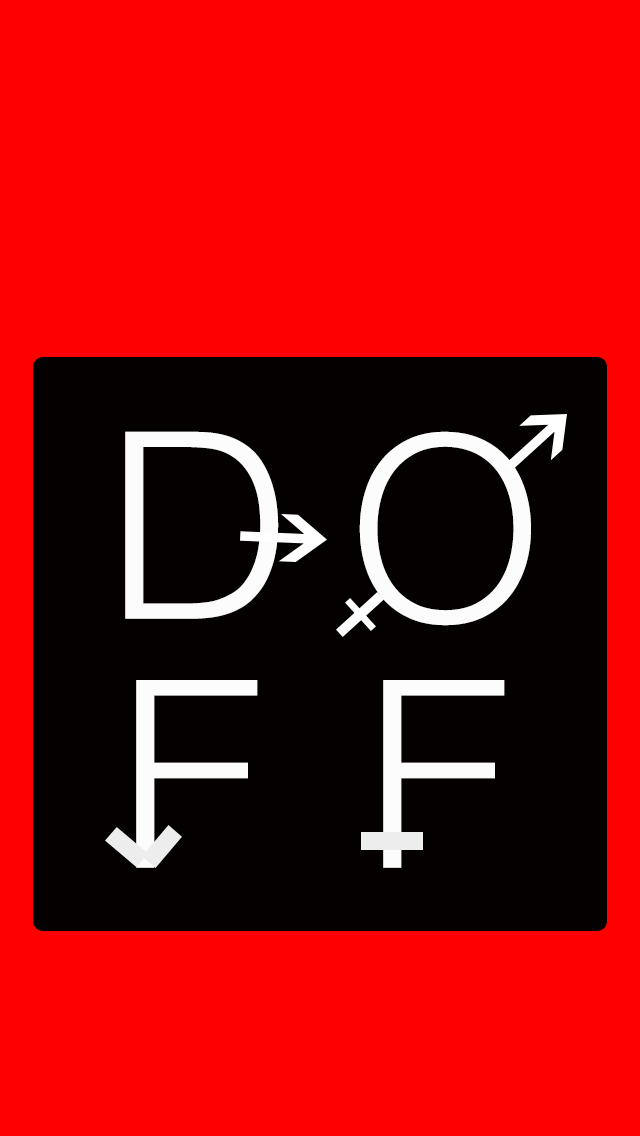
<style>
.page{position:relative;width:640px;height:1136px;background:#ff0000}
.page>*{position:absolute;margin:0}
.t1{font:259.5px "Helvetica-Light";letter-spacing:0.1em;color:#fcfcfc}
.t2{font:254.7px "Helvetica-Light";letter-spacing:0.1em;color:#fcfcfc}
.t3{font:260.3px "Helvetica-Light";letter-spacing:0.1em;color:#fcfcfc}
</style>
<div class="page">
<p class="t1" style="left:125px;top:431px;width:154px;height:188px">D</p>
<p class="t2" style="left:359px;top:431px;width:172px;height:195px">O</p>
<p class="t3" style="left:136px;top:680px;width:122px;height:188px">F</p>
<p class="t3" style="left:383px;top:680px;width:122px;height:188px">F</p>
</div>
